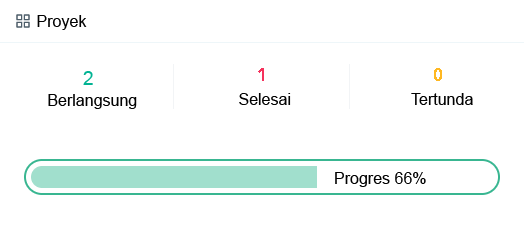
<style>
.page{position:relative;width:524px;height:238px;background:#ffffff}
.page>*{position:absolute;margin:0}
.t1{font:16px "ArialMT";color:#020202}
.t2{font:18.7px "ArialMT";color:#01b393}
</style>
<div class="page">
<p class="t1" style="left:37px;top:15px;width:50px;height:15px">Proyek</p>
<p class="t2" style="left:83px;top:71px;width:10px;height:14px">2</p>
<p class="t1" style="left:48px;top:94px;width:89px;height:15px">Berlangsung</p>
<p class="t1" style="left:239px;top:93px;width:52px;height:12px">Selesai</p>
<p class="t1" style="left:411px;top:93px;width:62px;height:12px">Tertunda</p>
<p class="t1" style="left:335px;top:172px;width:91px;height:15px">Progres 66%</p>
</div>
